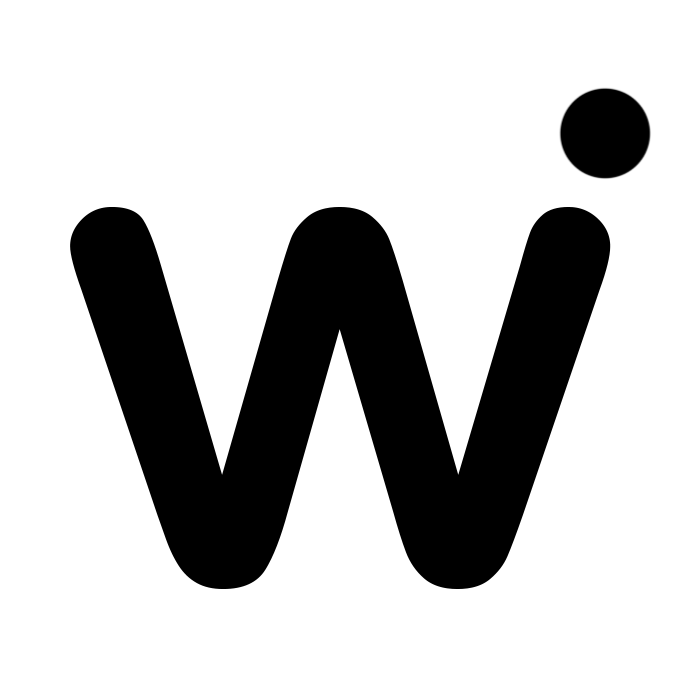
<style>
.page{position:relative;width:700px;height:700px;background:#ffffff}
.page>*{position:absolute;margin:0}
.t1{font:704.2px "ArialRoundedMTBold";letter-spacing:-0.05em;color:#000000}
</style>
<div class="page">
<p class="t1" style="left:70px;top:207px;width:541px;height:382px">w</p>
</div>
